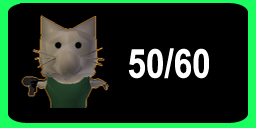
<style>
.page{position:relative;width:256px;height:128px;background:#000000}
.page>*{position:absolute;margin:0}
.t1{font:40px "Arial-BoldMT";color:#ffffff;scale:0.83 1}
</style>
<div class="page">
<p class="t1" style="left:128px;top:48px;width:81px;height:31px">50/60</p>
</div>
